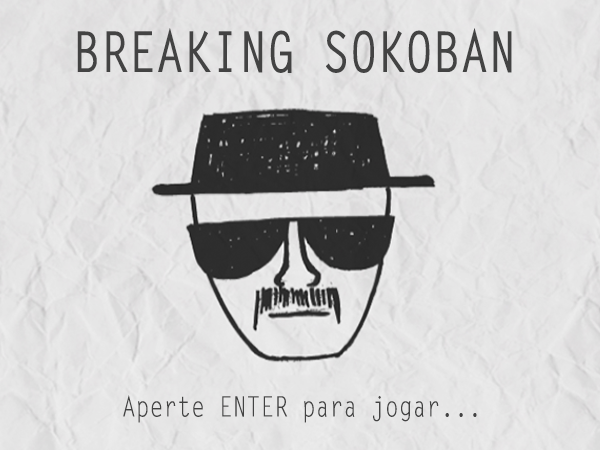
<style>
.page{position:relative;width:600px;height:450px}
.page>*{position:absolute;margin:0}
.t1{font:56.2px "LetterGothicStd-Bold";color:#434343;scale:0.82 1}
.t2{font:28.1px "LetterGothicStd";color:#434343;scale:0.82 1}
</style>
<div class="page">
<p class="t1" style="left:77px;top:28px;width:435px;height:45px">BREAKING SOKOBAN</p>
<p class="t2" style="left:123px;top:395px;width:354px;height:28px">Aperte ENTER para jogar...</p>
</div>
